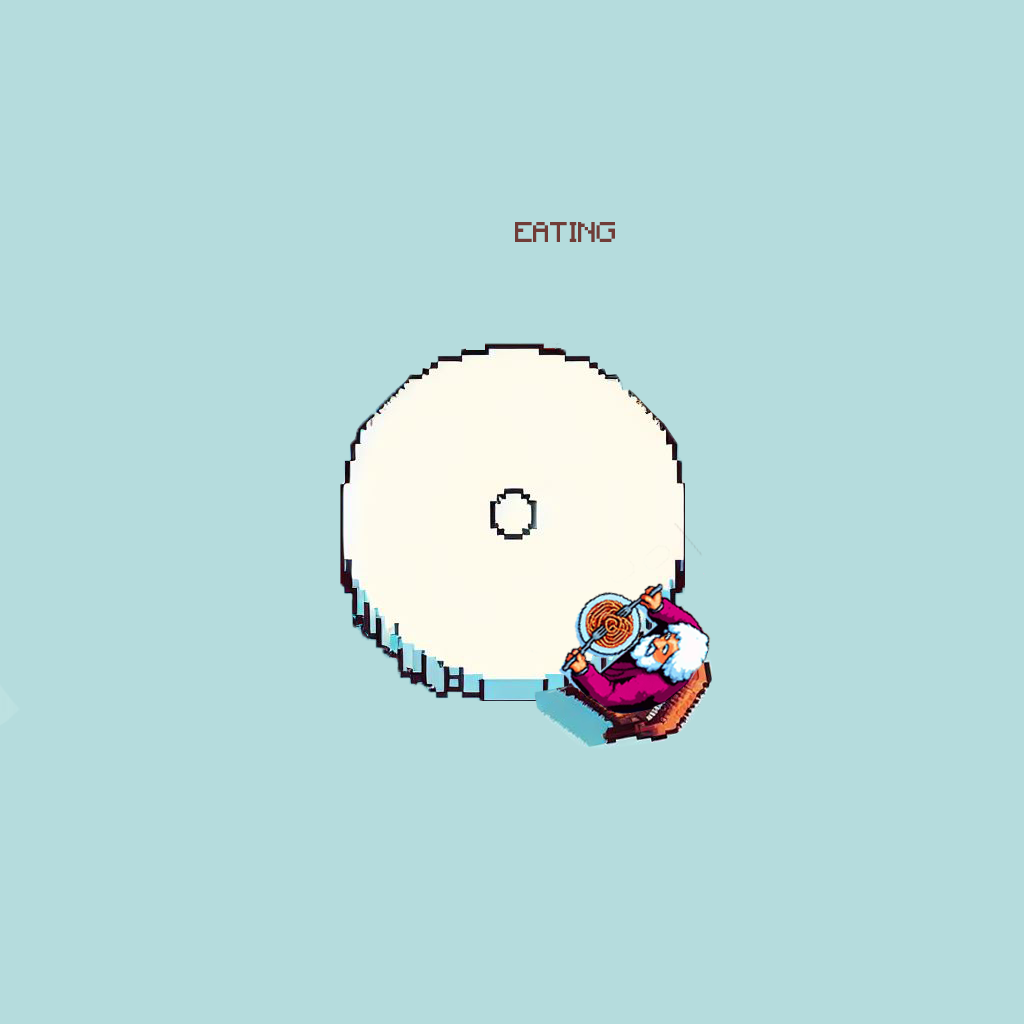
<style>
.page{position:relative;width:1024px;height:1024px;background:#b5dcdd}
.page>*{position:absolute;margin:0}
.t1{font:26.6px "Minecraft";color:#703c37}
</style>
<div class="page">
<p class="t1" style="left:515px;top:222px;width:100px;height:20px">EATING</p>
</div>
